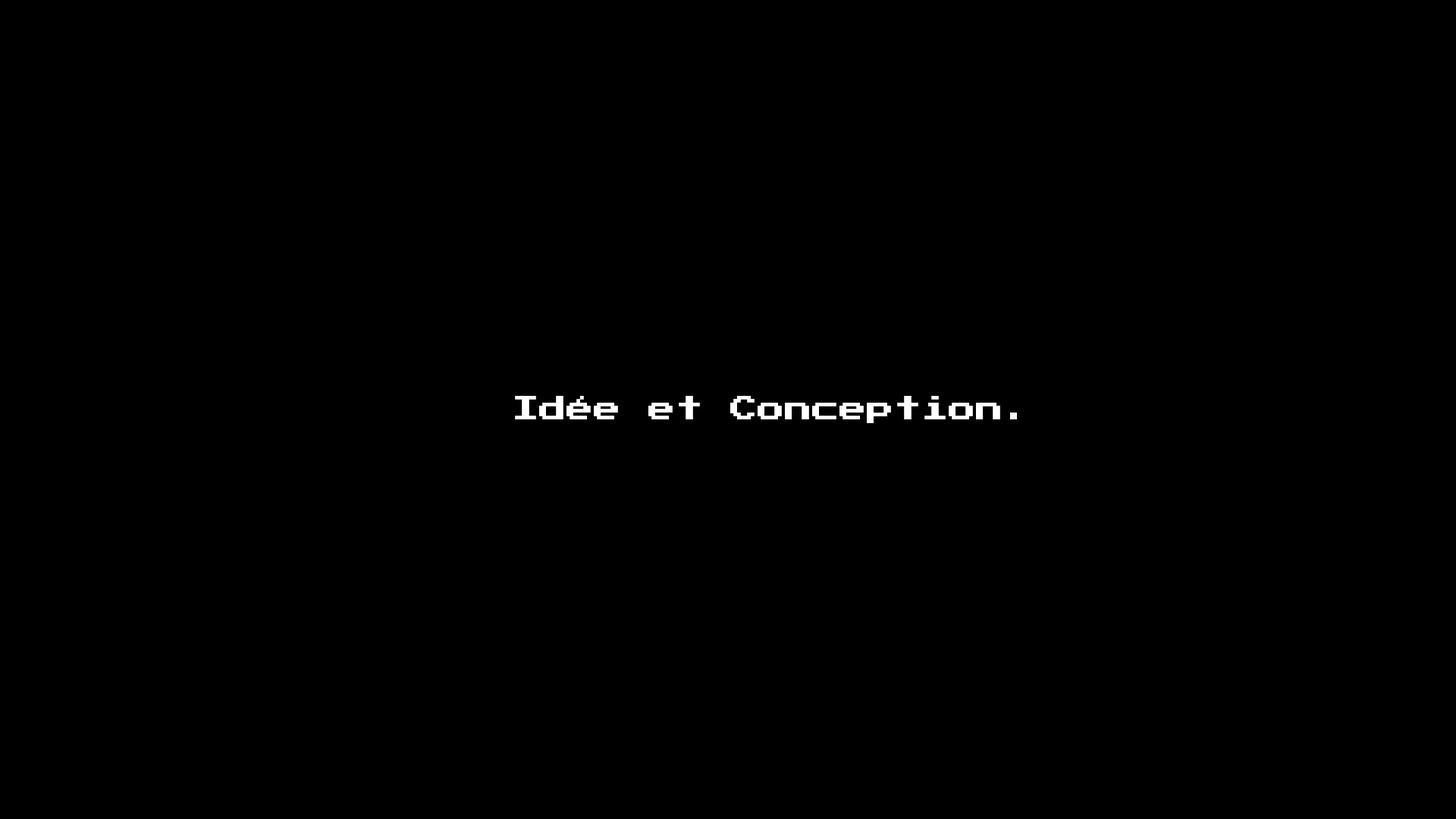
<style>
.page{position:relative;width:1456px;height:819px;background:#000000}
.page>*{position:absolute;margin:0}
.t1{font:27.3px "PressStart2P-Regular";color:#ffffff}
</style>
<div class="page">
<p class="t1" style="left:515px;top:396px;width:502px;height:27px">Idée et Conception.</p>
<p class="t1" style="left:515px;top:396px;width:485px;height:27px">Idée et Conception</p>
</div>
